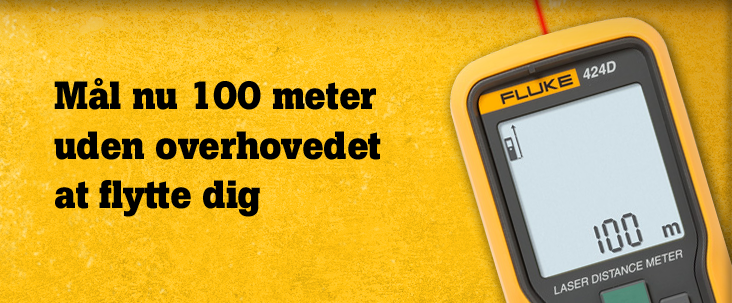
<style>
.page{position:relative;width:732px;height:303px}
.page>*{position:absolute;margin:0}
.t1{font:39px/39px "BotonPro-Bold";letter-spacing:-0.01em;color:#000000}
</style>
<div class="page">
<p class="t1" style="left:54px;top:78px;width:327px;height:139px">Mål nu 100 meter <br>uden overhovedet <br>at flytte dig</p>
</div>
